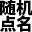
<style>
.page{position:relative;width:32px;height:32px;background:#000000}
.page>*{position:absolute;margin:0}
.t1{font:16.7px "SourceHanSansCN-Heavy";color:#000000}
</style>
<div class="page">
<p class="t1" style="left:0px;top:0px;width:33px;height:16px">随机</p>
<p class="t1" style="left:0px;top:15px;width:31px;height:17px">点名</p>
</div>
